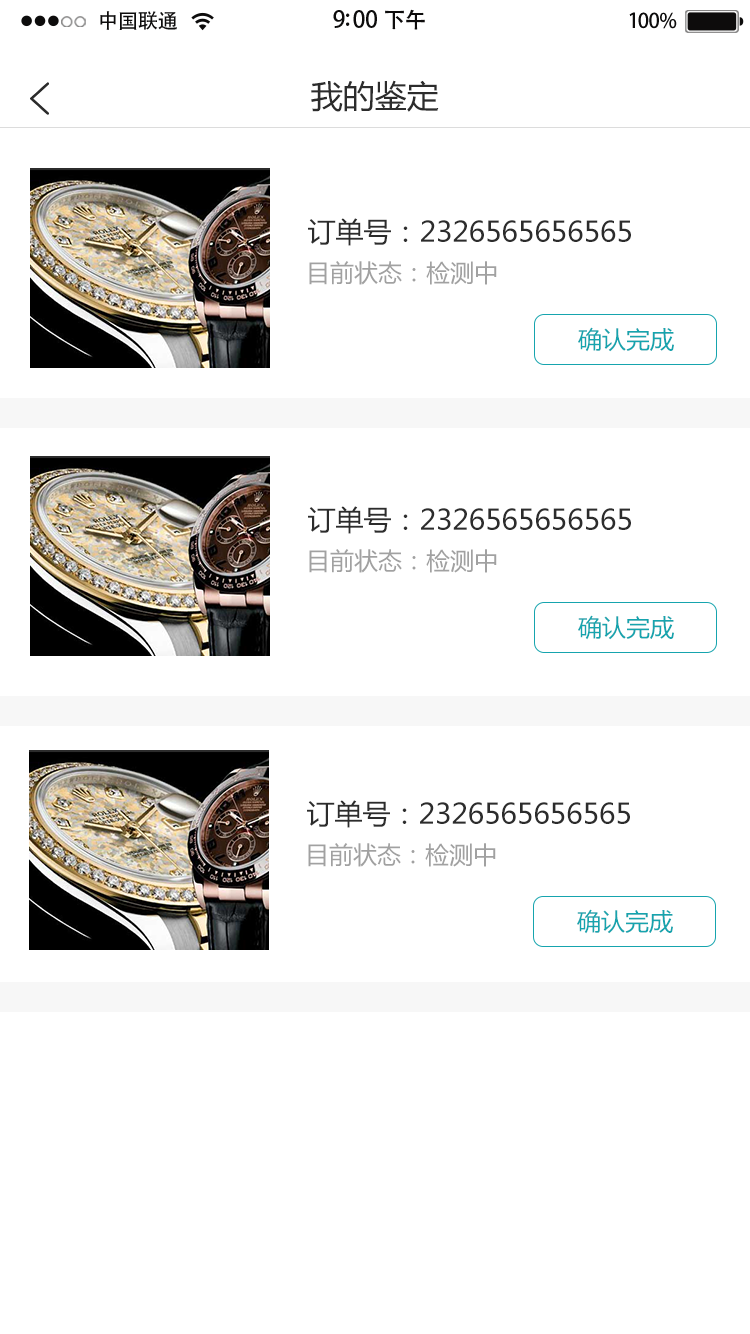
<style>
.page{position:relative;width:750px;height:1334px;background:#ffffff}
.page>*{position:absolute;margin:0}
.t1{font:20.4px "AdobeHeitiStd-Regular";letter-spacing:-0.02em;color:#000000}
.t2{font:23px "AdobeHeitiStd-Regular";letter-spacing:-0.02em;color:#000000}
.t3{font:22px "AdobeHeitiStd-Regular";letter-spacing:-0.02em;color:#000000}
.t4{font:20.4px "AdobeHeitiStd-Regular";letter-spacing:-0.02em;color:#010101}
.t5{font:32px "MicrosoftYaHei";color:#2c2c2c}
.t6{font:28px "MicrosoftYaHei";color:#2c2c2c}
.t7{font:24px "MicrosoftYaHei";color:#a1a1a1}
.t8{font:24px "MicrosoftYaHei";color:#16a4ae}
</style>
<div class="page">
<p class="t1" style="left:100px;top:11px;width:77px;height:19px">中国联通</p>
<p class="t2" style="left:333px;top:9px;width:92px;height:21px">9:00 <span class="t3">下午</span></p>
<p class="t4" style="left:629px;top:12px;width:48px;height:17px">100%</p>
<p class="t5" style="left:311px;top:80px;width:128px;height:32px">我的鉴定</p>
<p class="t6" style="left:308px;top:218px;width:323px;height:28px">订单号：2326565656565</p>
<p class="t7" style="left:309px;top:261px;width:188px;height:24px">目前状态：检测中</p>
<p class="t8" style="left:578px;top:327px;width:96px;height:25px">确认完成</p>
<p class="t6" style="left:308px;top:506px;width:323px;height:28px">订单号：2326565656565</p>
<p class="t7" style="left:309px;top:549px;width:188px;height:24px">目前状态：检测中</p>
<p class="t8" style="left:578px;top:615px;width:96px;height:25px">确认完成</p>
<p class="t6" style="left:307px;top:800px;width:323px;height:28px">订单号：2326565656565</p>
<p class="t7" style="left:308px;top:843px;width:188px;height:24px">目前状态：检测中</p>
<p class="t8" style="left:577px;top:909px;width:96px;height:25px">确认完成</p>
</div>
